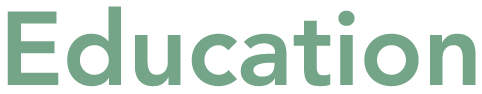
<style>
.page{position:relative;width:482px;height:94px;background:#ffffff}
.page>*{position:absolute;margin:0}
.t1{font:103.4px "Avenir-Heavy";color:#74a588}
</style>
<div class="page">
<p class="t1" style="left:7px;top:6px;width:469px;height:81px">Education</p>
</div>
